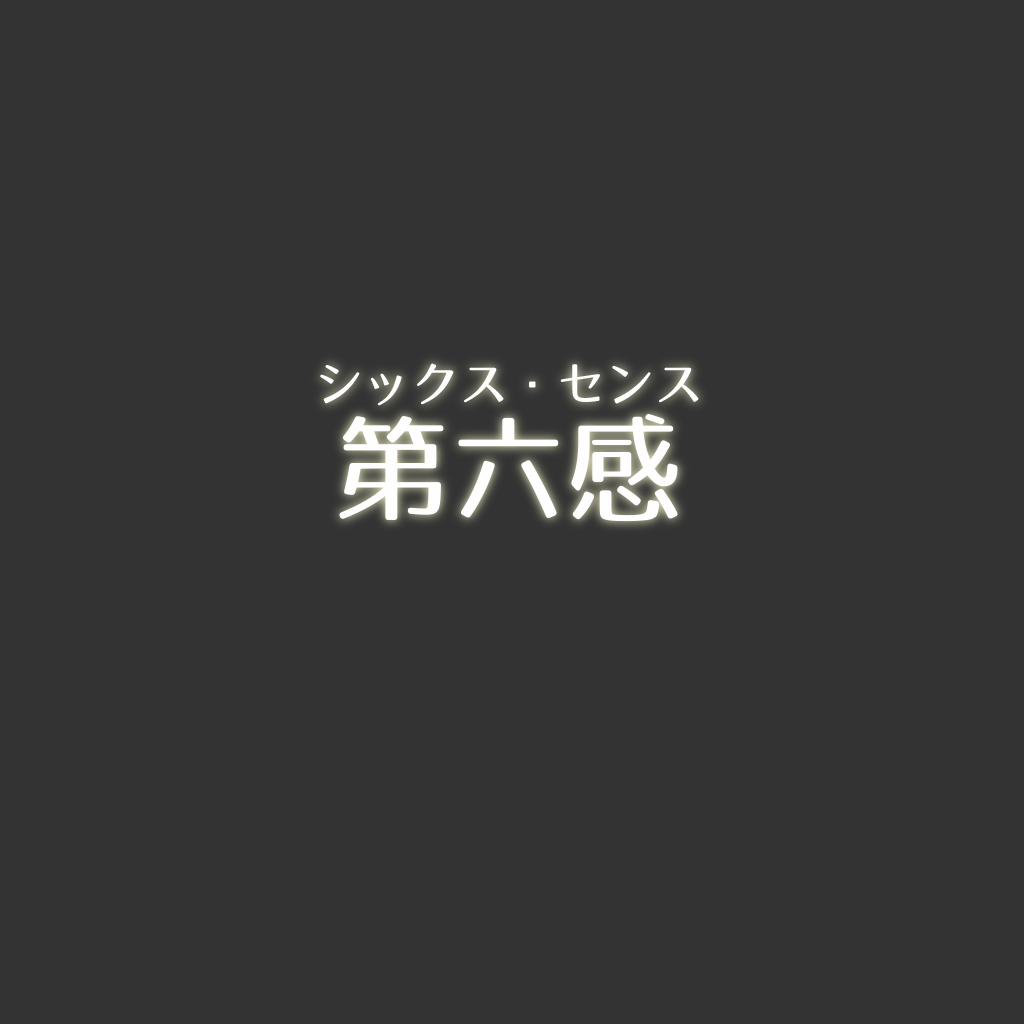
<style>
.page{position:relative;width:1024px;height:1024px;background:#333333}
.page>*{position:absolute;margin:0}
.t1{font:48.6px "07LogoTypeGothic7";color:#fefefe}
.t2{font:116.7px "07LogoTypeGothic7";color:#fefefe}
</style>
<div class="page">
<p class="t1" style="left:320px;top:363px;width:379px;height:43px">シックス・センス</p>
<p class="t2" style="left:339px;top:414px;width:339px;height:108px">第六感</p>
</div>
